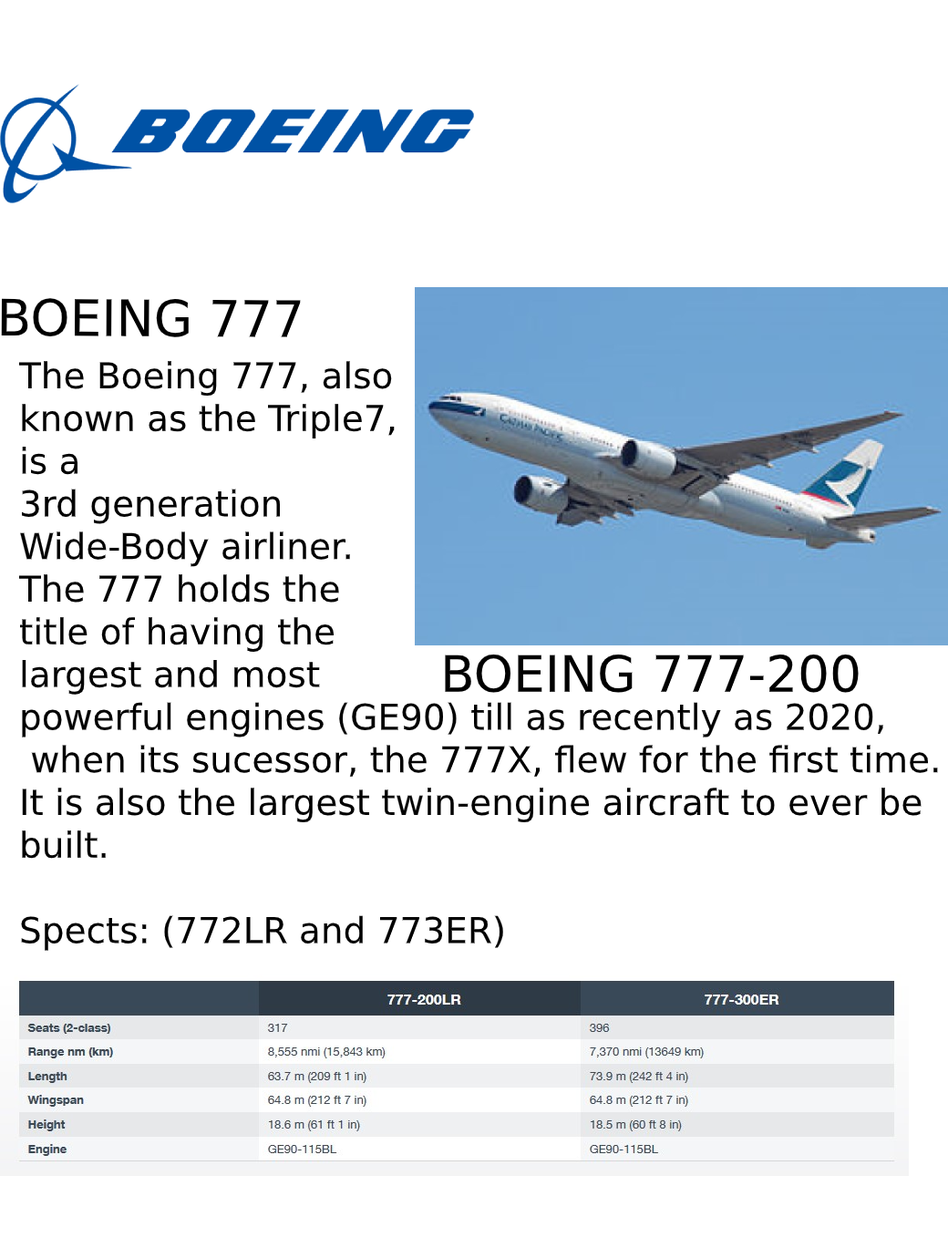
<style>
.page{position:relative;width:948px;height:1258px;background:#ffffff}
.page>*{position:absolute;margin:0}
.t1{font:50.1px "DejaVuSans";color:#000000}
.t2{font:35.5px "DejaVuSans";color:#000000}
</style>
<div class="page">
<p class="t1" style="left:1px;top:298px;width:300px;height:39px">BOEING 777</p>
<p class="t2" style="left:18px;top:361px;width:920px;height:590px">The Boeing 777, also<br>known as the Triple7,<br>is a<br>3rd generation <br>Wide-Body airliner.<br>The 777 holds the <br>title of having the<br>largest and most<br>powerful engines (GE90) till as recently as 2020,<br> when its sucessor, the 777X, flew for the first time.<br>It is also the largest twin-engine aircraft to ever be <br>built.<br><br>Spects: (772LR and 773ER)</p>
<p class="t1" style="left:445px;top:654px;width:414px;height:39px">BOEING 777-200</p>
</div>
